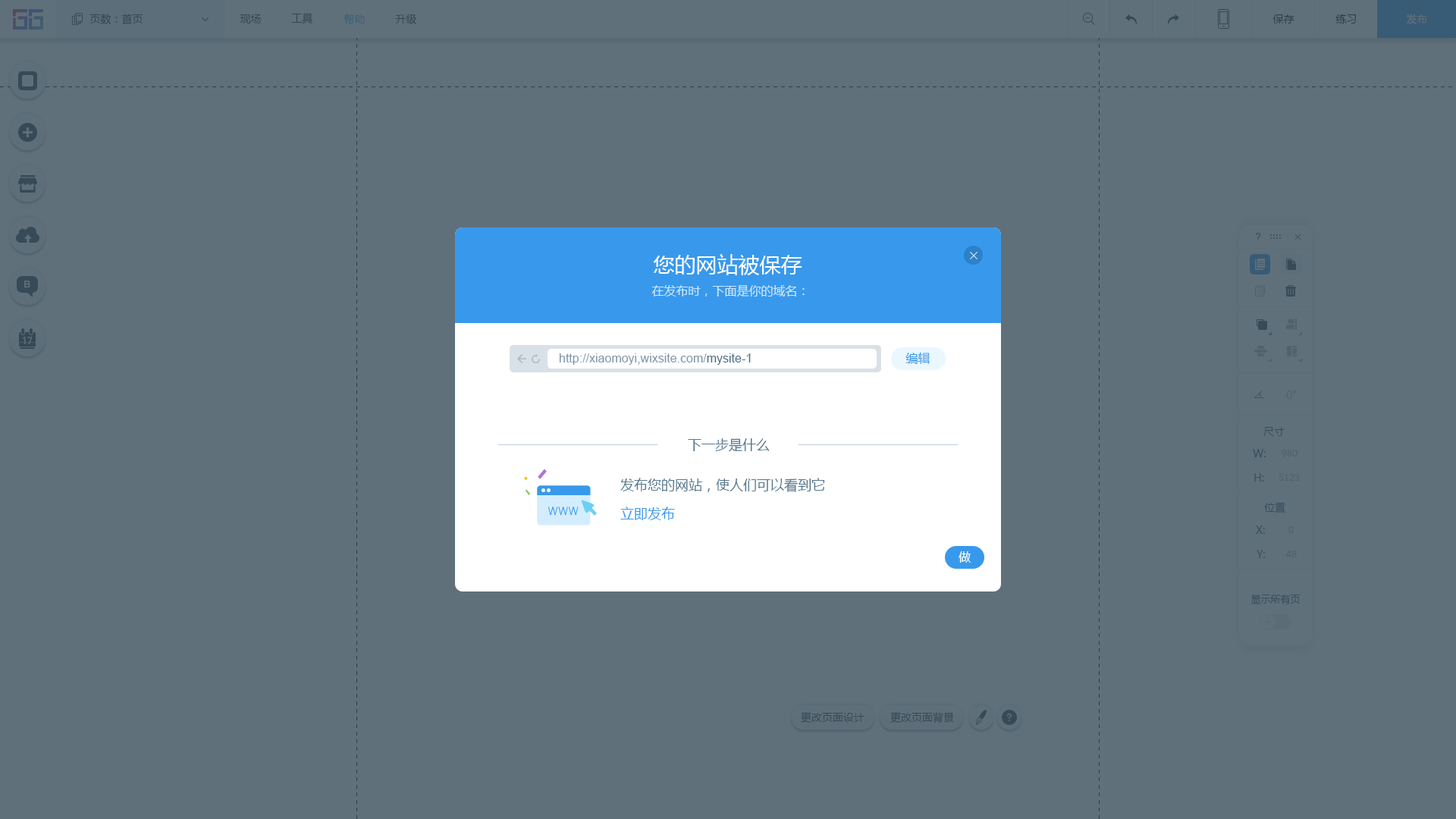
<style>
.page{position:relative;width:1456px;height:819px;background:#60707a}
.page>*{position:absolute;margin:0}
.t1{font:10.6px "MicrosoftYaHei";color:#20303c}
.t2{font:10.6px "MicrosoftYaHei";color:#3c6178}
.t3{font:10.6px "MicrosoftYaHei";color:#334653}
.t4{font:10.6px "MicrosoftYaHei";color:#2d3d47}
.t5{font:10.6px "MicrosoftYaHei";color:#60707a}
.t6{font:21.2px "MicrosoftYaHei";color:#ffffff}
.t7{font:12.1px "MicrosoftYaHei";color:#cbe8fe}
.t8{font:12.1px "ArialMT";color:#8097a9}
.t9{font:12.1px "ArialMT";color:#4c7088}
.t10{font:12.1px "MicrosoftYaHei";color:#3899ec}
.t11{font:10.6px "MicrosoftYaHei";color:#52626d}
.t12{font:10.6px "MicrosoftYaHei";color:#2b5672}
.t13{font:13.6px "MicrosoftYaHei";color:#55788e}
.t14{font:9.1px "MicrosoftYaHei";color:#52626d}
.t15{font:13.6px "MicrosoftYaHei";color:#3899ec}
.t16{font:12.1px "MicrosoftYaHei";color:#ffffff}
.t17{font:9.9px "MicrosoftYaHei";color:#2b5672}
.t18{font:10.6px "MicrosoftYaHei";color:#2d4150}
</style>
<div class="page">
<p class="t1" style="left:89px;top:14px;width:54px;height:11px">页数：首页</p>
<p class="t1" style="left:240px;top:14px;width:21px;height:10px">现场</p>
<p class="t1" style="left:291px;top:13px;width:22px;height:11px">工具</p>
<p class="t2" style="left:344px;top:14px;width:21px;height:11px">帮助</p>
<p class="t3" style="left:395px;top:14px;width:22px;height:10px">升级</p>
<p class="t4" style="left:1272px;top:14px;width:22px;height:10px">保存</p>
<p class="t4" style="left:1335px;top:14px;width:22px;height:10px">练习</p>
<p class="t5" style="left:1406px;top:14px;width:22px;height:10px">发布</p>
<p class="t6" style="left:653px;top:254px;width:149px;height:21px">您的网站被保存</p>
<p class="t7" style="left:651px;top:285px;width:154px;height:12px">在发布时，下面是你的域名：</p>
<p class="t8" style="left:559px;top:353px;width:192px;height:12px">http://xiaomoyi,wixsite.com/<span class="t9">mysite-1</span></p>
<p class="t10" style="left:905px;top:352px;width:25px;height:12px">编辑</p>
<p class="t11" style="left:1286px;top:391px;width:11px;height:8px">0°</p>
<p class="t12" style="left:1263px;top:427px;width:22px;height:9px">尺寸</p>
<p class="t13" style="left:688px;top:438px;width:82px;height:14px">下一步是什么</p>
<p class="t12" style="left:1253px;top:449px;width:13px;height:8px">W:</p>
<p class="t14" style="left:1282px;top:450px;width:15px;height:7px">980</p>
<p class="t12" style="left:1254px;top:473px;width:10px;height:9px">H:</p>
<p class="t14" style="left:1279px;top:474px;width:21px;height:7px">5123</p>
<p class="t13" style="left:620px;top:478px;width:205px;height:14px">发布您的网站，使人们可以看到它</p>
<p class="t15" style="left:620px;top:507px;width:55px;height:13px">立即发布</p>
<p class="t12" style="left:1264px;top:502px;width:22px;height:11px">位置</p>
<p class="t12" style="left:1256px;top:526px;width:9px;height:8px">X:</p>
<p class="t14" style="left:1288px;top:526px;width:6px;height:7px">0</p>
<p class="t16" style="left:959px;top:551px;width:12px;height:12px">做</p>
<p class="t12" style="left:1257px;top:550px;width:8px;height:8px">Y:</p>
<p class="t14" style="left:1286px;top:551px;width:11px;height:6px">48</p>
<p class="t17" style="left:1250px;top:594px;width:51px;height:10px">显示所有页</p>
<p class="t18" style="left:801px;top:712px;width:63px;height:11px">更改页面设计</p>
<p class="t18" style="left:890px;top:712px;width:64px;height:11px">更改页面背景</p>
</div>
